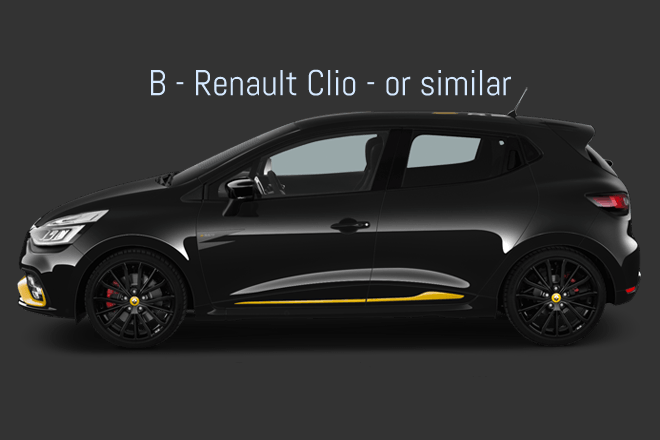
<style>
.page{position:relative;width:660px;height:440px;background:#333333}
.page>*{position:absolute;margin:0}
.t1{font:36px "Abel-Regular";color:#d5e9ff}
</style>
<div class="page">
<p class="t1" style="left:150px;top:69px;width:361px;height:27px">B - Renault Clio - or similar</p>
</div>
